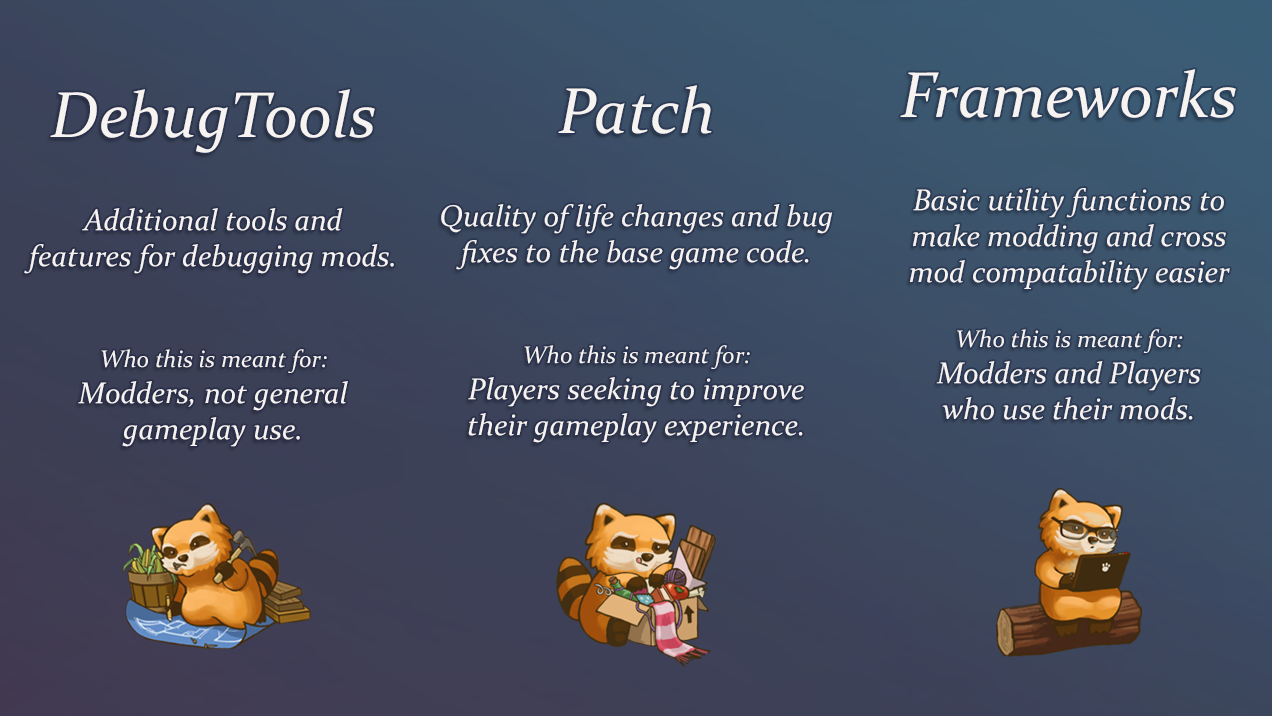
<style>
.page{position:relative;width:1272px;height:716px}
.page>*{position:absolute;margin:0}
.t1{font:30px "Constantia-Italic";color:#f7f3f1}
.t2{font:65px "Constantia-Italic";color:#f7f3f1}
.t3{font:24px "Constantia-Italic";color:#f7f3f1}
</style>
<div class="page">
<p class="t1" style="left:900px;top:69px;width:336px;height:351px;text-align:center"><span class="t2">Frameworks<br> <br></span>Basic utility functions to make modding and cross mod compatability easier<br> <br><span class="t3">Who this is meant for: <br></span>Modders and Players <br>who use their mods.</p>
<p class="t1" style="left:24px;top:89px;width:370px;height:358px;text-align:center"><span class="t2">DebugTools<br> <br></span>Additional tools and <br>features for debugging mods.<br><br><br><span class="t3">Who this is meant for: <br></span>Modders, not general gameplay use.</p>
<p class="t1" style="left:441px;top:85px;width:392px;height:358px;text-align:center"><span class="t2">Patch<br> <br></span>Quality of life changes and bug fixes to the base game code.<br><br><br><span class="t3">Who this is meant for: <br></span>Players seeking to improve <br>their gameplay experience.</p>
</div>
